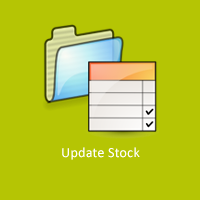
<style>
.page{position:relative;width:200px;height:200px;background:#b5c504}
.page>*{position:absolute;margin:0}
.t1{font:14px "Calibri";letter-spacing:0.02em;color:#ffffff}
</style>
<div class="page">
<p class="t1" style="left:62px;top:147px;width:78px;height:13px">Update Stock</p>
</div>
